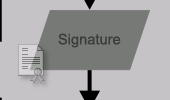
<style>
.page{position:relative;width:170px;height:100px;background:#c6c3c6}
.page>*{position:absolute;margin:0}
.t1{font:14.7px "ArialMT";color:#3b3c3b}
</style>
<div class="page">
<p class="t1" style="left:58px;top:33px;width:63px;height:15px">Signature</p>
</div>
